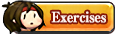
<style>
.page{position:relative;width:115px;height:34px}
.page>*{position:absolute;margin:0}
.t1{font:14px "RyuminPro-ExBold";letter-spacing:-0.04em;color:#fff4ee;font-weight:bold;scale:0.9 1}
</style>
<div class="page">
<p class="t1" style="left:51px;top:11px;width:55px;height:12px">Exercises</p>
</div>
